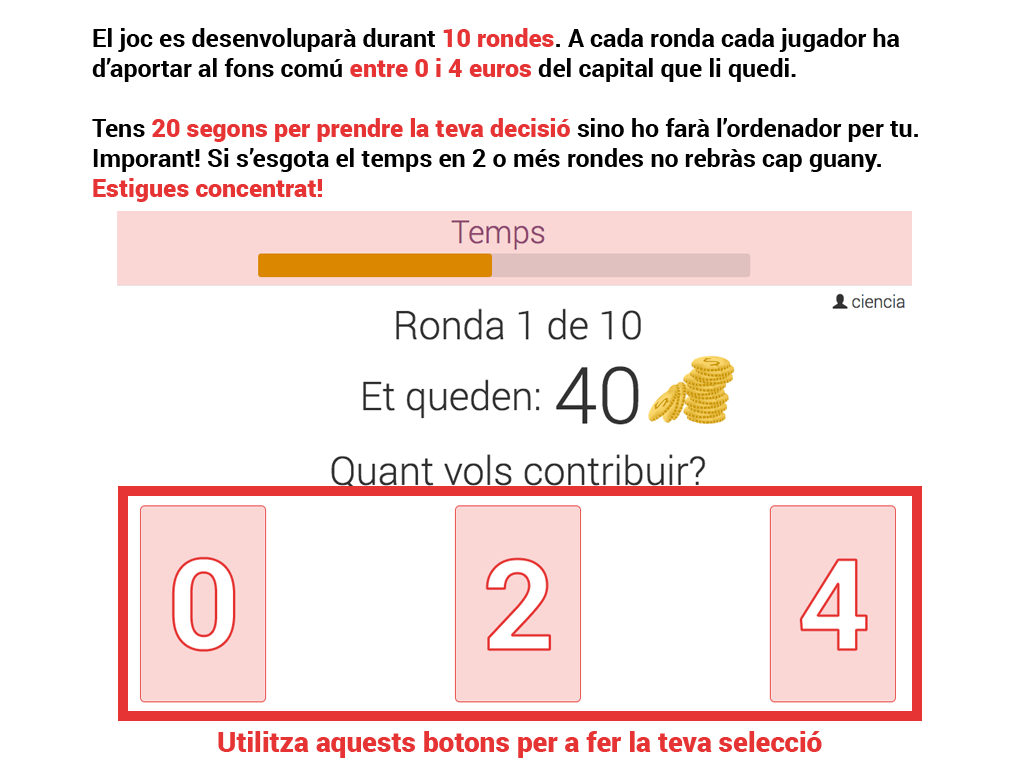
<style>
.page{position:relative;width:1024px;height:768px;background:#ffffff}
.page>*{position:absolute;margin:0}
.t1{font:25px "Roboto-Bold";color:#000000}
.t2{font:25px "Roboto-Black";color:#e63334}
.t3{font:28px "Roboto-Black";color:#e63334}
</style>
<div class="page">
<p class="t1" style="left:92px;top:28px;width:826px;height:174px">El joc es desenvoluparà durant <span class="t2">10 rondes</span>. A cada ronda cada jugador ha<br>d’aportar al fons comú <span class="t2">entre 0 i 4 euros </span>del capital que li quedi.<br><br>Tens <span class="t2">20 segons per prendre la teva decisió</span> sino ho farà l’ordenador per tu.<br>Imporant! Si s’esgota el temps en 2 o més rondes no rebràs cap guany.<br><span class="t2">Estigues concentrat!</span></p>
<p class="t3" style="left:218px;top:731px;width:604px;height:27px">Utilitza aquests botons per a fer la teva selecció</p>
</div>
